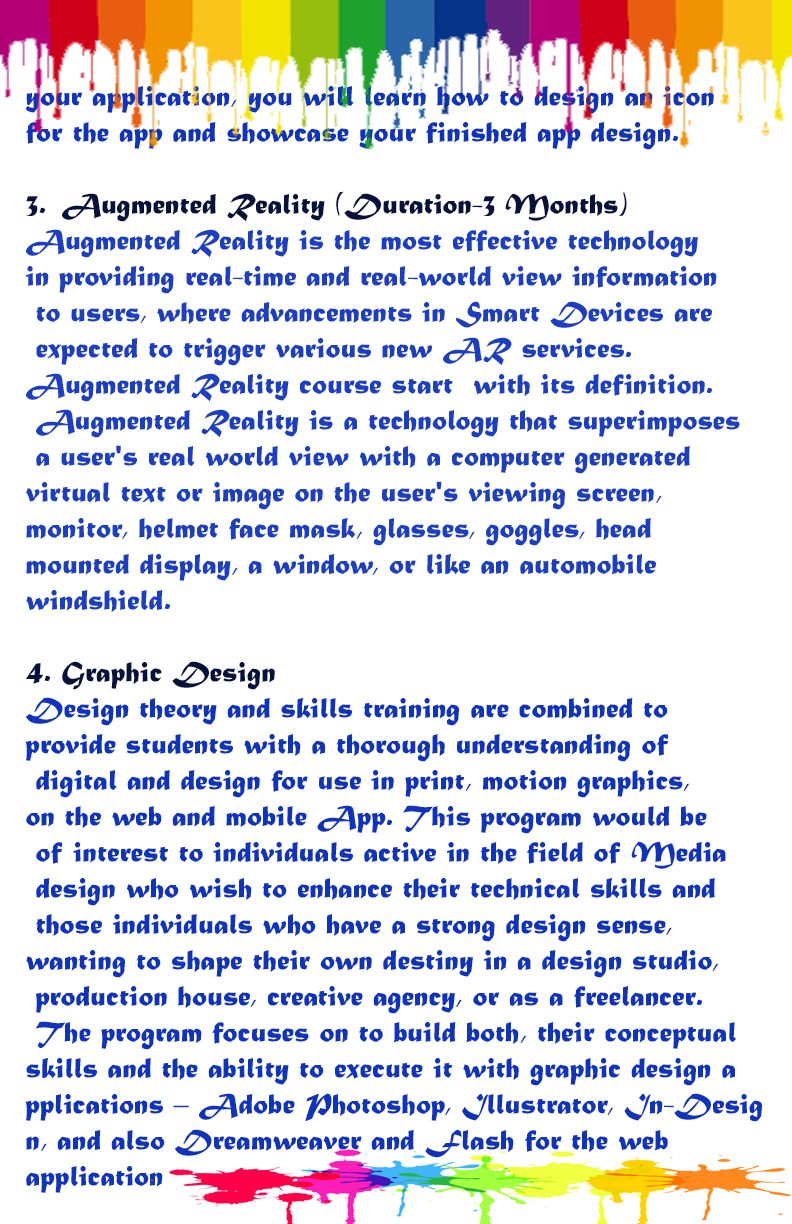
<style>
.page{position:relative;width:792px;height:1224px;background:#ffffff}
.page>*{position:absolute;margin:0}
.t1{font:30px "MaturaMTScriptCapitals";color:#0f33bc}
.t2{font:30px "MaturaMTScriptCapitals";color:#07123c}
.t3{font:30px "MaturaMTScriptCapitals";color:#1b3ec3}
</style>
<div class="page">
<p class="t1" style="left:25px;top:86px;width:737px;height:1107px">your application, you will learn how to design an icon <br>for the app and showcase your finished app design.<br><span class="t2"><br>3. Augmented Reality (Duration-3 Months)<br></span><span class="t3">Augmented Reality is the most effective technology <br>in providing real-time and real-world view information<br> to users, where advancements in Smart Devices are<br> expected to trigger various new AR services. <br>Augmented Reality course start  with its definition.<br> Augmented Reality is a technology that superimposes<br> a user's real world view with a computer generated <br>virtual text or image on the user's viewing screen, <br>monitor, helmet face mask, glasses, goggles, head <br>mounted display, a window, or like an automobile <br>windshield.<br></span><span class="t2"><br>4. Graphic Design<br></span>Design theory and skills training are combined to <br>provide students with a thorough understanding of<br> digital and design for use in print, motion graphics, <br>on the web and mobile App. This program would be<br> of interest to individuals active in the field of Media<br> design who wish to enhance their technical skills and<br> those individuals who have a strong design sense, <br>wanting to shape their own destiny in a design studio,<br> production house, creative agency, or as a freelancer.<br> The program focuses on to build both, their conceptual <br>skills and the ability to execute it with graphic design a<br>pplications – Adobe Photoshop, Illustrator, In-Desig<br>n, and also Dreamweaver and Flash for the web <br>application</p>
</div>
